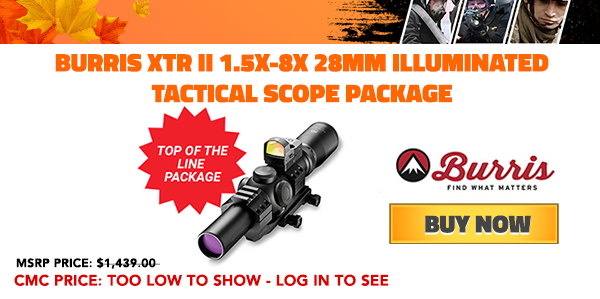
<style>
.page{position:relative;width:600px;height:299px;background:#ffffff}
.page>*{position:absolute;margin:0}
.t1{font:25.6px "Titillium-Black";letter-spacing:0.005em;color:#ff6600}
.t2{font:11.7px "AvenirLTPro-Heavy";letter-spacing:0.005em;color:#000000;font-weight:bold}
.t3{font:14.6px "AvenirLTPro-Heavy";letter-spacing:0.005em;color:#dc0000;font-weight:bold}
</style>
<div class="page">
<p class="t1" style="left:55px;top:53px;width:494px;height:50px;text-align:center">BURRIS XTR II 1.5X-8X 28MM ILLUMINATED<br>TACTICAL SCOPE PACKAGE</p>
<p class="t2" style="left:16px;top:257px;width:144px;height:12px">MSRP PRICE: $1,439.00</p>
<p class="t3" style="left:14px;top:274px;width:375px;height:12px">CMC PRICE: TOO LOW TO SHOW - LOG IN TO SEE</p>
</div>
